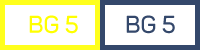
<style>
.page{position:relative;width:200px;height:50px;background:#ffffff}
.page>*{position:absolute;margin:0}
.t1{font:24px "Panton-SemiBold";color:#ffff00}
.t2{font:24px "Panton-SemiBold";color:#34486b}
</style>
<div class="page">
<p class="t1" style="left:29px;top:15px;width:49px;height:19px">BG 5</p>
<p class="t2" style="left:126px;top:15px;width:49px;height:19px">BG 5</p>
</div>
